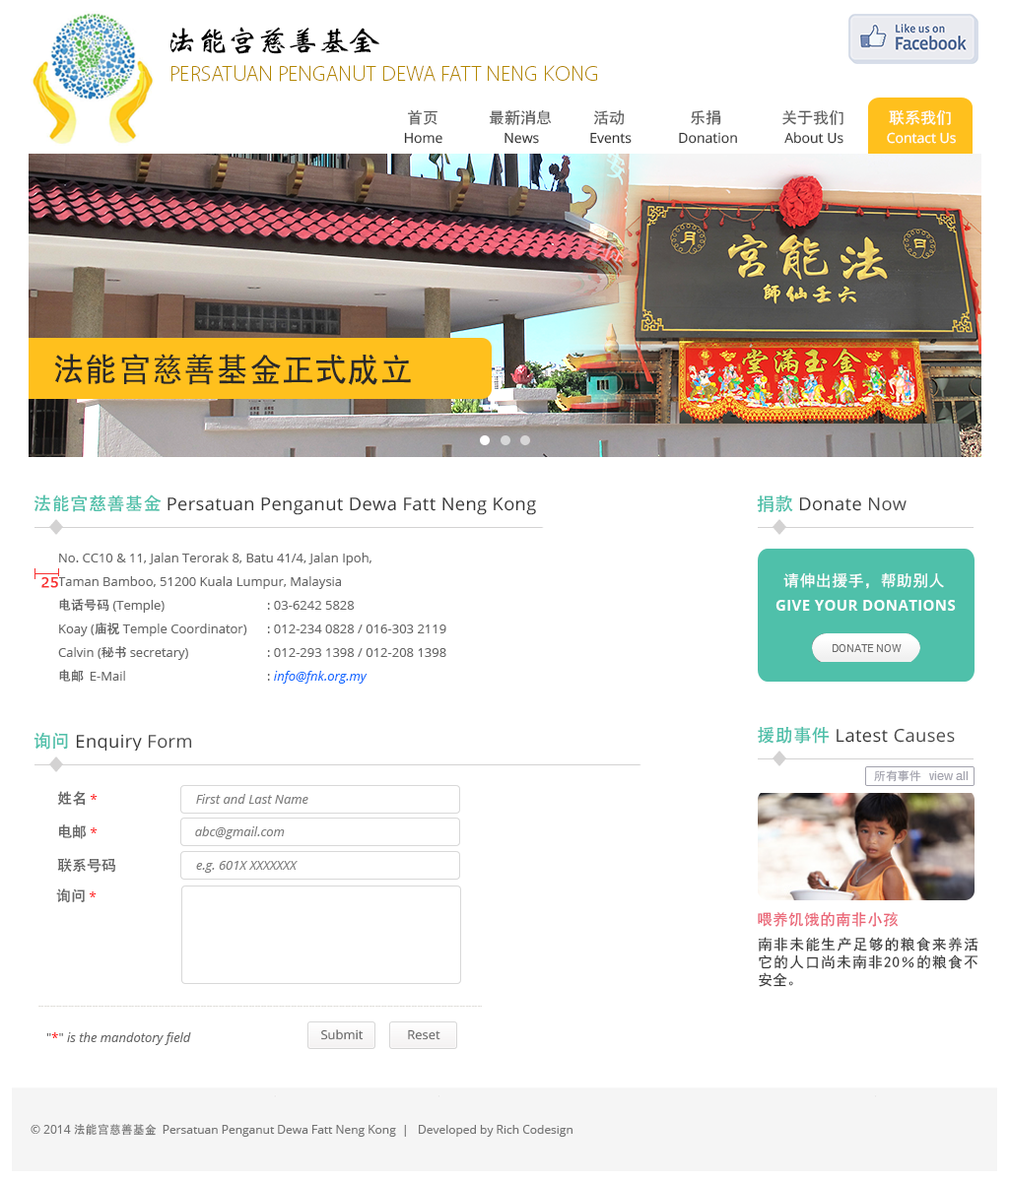
<style>
.page{position:relative;width:1009px;height:1182px;background:#ffffff}
.page>*{position:absolute;margin:0}
.t1{font:30.4px "WeibeiCSEG??NÑ²ó??";letter-spacing:-0.05em;color:#000000;text-transform:uppercase;scale:1.04 1}
.t2{font:21.6px "Vegur-Light";color:#b38701;text-transform:uppercase;scale:1.03 1}
.t3{font:15.8px "SimHei";color:#5a5a5a}
.t4{font:15.8px "SimHei";color:#ffffff}
.t5{font:13.8px "OpenSans";color:#303030}
.t6{font:13.8px "OpenSans";color:#ffffff}
.t7{font:33.6px "MS-Hei";color:#292929}
.t8{font:17.7px "OpenSans";letter-spacing:0.025em;color:#343434}
.t9{font:17.7px "AdobeHeitiStd-Regular";letter-spacing:0.025em;color:#4fc0aa}
.t10{font:17.7px "OpenSans";letter-spacing:0.025em;color:#474747}
.t11{font:12.8px/23.6px "OpenSans";color:#666666}
.t12{font:12.8px/23.6px "AdobeHeitiStd-Regular";color:#666666}
.t13{font:13.8px "Verdana";color:#f83030;font-weight:bold}
.t14{font:15.8px "SimHei";letter-spacing:0.025em;color:#ffffff}
.t15{font:12.8px/23.6px "OpenSans-Italic";color:#146cff}
.t16{font:14.8px "OpenSans-Bold";letter-spacing:0.025em;color:#ffffff}
.t17{font:11.8px "SimHei";color:#a2a2ad}
.t18{font:14.8px/33.5px "AdobeHeitiStd-Regular";color:#666666}
.t19{font:12.8px/33.5px "OpenSans";color:#ff0000}
.t20{font:12.8px "OpenSans-Italic";color:#7e7e7e}
.t21{font:14.8px "AdobeHeitiStd-Regular";color:#666666}
.t22{font:12.8px "OpenSans";color:#ff0000}
.t23{font:15.8px "MS-Hei";color:#ea6274}
.t24{font:14.8px/17.7px "SimHei";color:#353535}
.t25{font:12.8px "OpenSans-Italic";color:#666666}
.t26{font:12.8px "OpenSans";color:#666666}
.t27{font:12.2px "OpenSans";color:#666666;scale:1.04 1}
.t28{font:11.8px "OpenSans";color:#737373}
.t29{font:11.8px "MS-Hei";color:#737373}
</style>
<div class="page">
<p class="t1" style="left:170px;top:27px;width:209px;height:27px">法能宫慈善基金</p>
<p class="t2" style="left:171px;top:65px;width:426px;height:17px">PERSATUAN PENGANUT DEWA fatt neng kong</p>
<p class="t3" style="left:407px;top:109px;width:30px;height:16px">首页</p>
<p class="t3" style="left:489px;top:109px;width:63px;height:16px">最新消息</p>
<p class="t3" style="left:594px;top:110px;width:31px;height:15px">活动</p>
<p class="t3" style="left:691px;top:109px;width:30px;height:16px">乐捐</p>
<p class="t3" style="left:782px;top:109px;width:61px;height:16px">关于我们</p>
<p class="t4" style="left:889px;top:109px;width:62px;height:16px">联系我们</p>
<p class="t5" style="left:404px;top:132px;width:552px;height:12px">Home                 News              Events             Donation             About Us            <span class="t6">Contact Us</span></p>
<p class="t7" style="left:54px;top:354px;width:357px;height:31px">法能宫慈善基金正式成立</p>
<p class="t8" style="left:34px;top:495px;width:502px;height:20px"><span class="t9">法能宫慈善基金 </span>Persatuan Penganut Dewa Fatt Neng Kong</p>
<p class="t8" style="left:757px;top:495px;width:149px;height:17px"><span class="t9">捐款</span> Donate <span class="t10">Now</span></p>
<p class="t11" style="left:58px;top:553px;width:313px;height:130px;text-align:justify">No. CC10 &amp; 11, Jalan Terorak 8, Batu 41/4, Jalan Ipoh, <br>Taman Bamboo, 51200 Kuala Lumpur, Malaysia<br><span class="t12">电话号码</span> (Temple) <br>Koay (<span class="t12">庙祝 </span>Temple Coordinator) <br>Calvin (<span class="t12">秘书 </span>secretary) <br><span class="t12">电邮  </span>E-Mail</p>
<p class="t13" style="left:41px;top:577px;width:17px;height:11px">25</p>
<p class="t14" style="left:783px;top:572px;width:161px;height:17px">请伸出援手，帮助别人</p>
<p class="t11" style="left:267px;top:601px;width:179px;height:83px;text-align:justify">: 03-6242 5828<br>: 012-234 0828 / 016-303 2119<br>: 012-293 1398 / 012-208 1398<br>: <span class="t15">info@fnk.org.my</span></p>
<p class="t16" style="left:775px;top:600px;width:181px;height:11px">GIVE YOUR DONATIONS</p>
<p class="t8" style="left:33px;top:732px;width:159px;height:21px"><span class="t9">询问</span> Enquiry <span class="t10">Form</span></p>
<p class="t8" style="left:758px;top:726px;width:197px;height:18px"><span class="t9">援助事件</span> Latest <span class="t10">Causes</span></p>
<p class="t17" style="left:874px;top:770px;width:47px;height:12px">所有事件</p>
<p class="t18" style="left:57px;top:791px;width:58px;height:82px">姓名 <span class="t19">*  <br></span>电邮<span class="t19"> *  <br></span>联系号码</p>
<p class="t20" style="left:196px;top:794px;width:112px;height:10px">First and Last Name</p>
<p class="t20" style="left:195px;top:826px;width:90px;height:13px">abc@gmail.com</p>
<p class="t20" style="left:196px;top:861px;width:101px;height:12px">e.g. 601X XXXXXXX</p>
<p class="t21" style="left:56px;top:889px;width:41px;height:14px">询问<span class="t22"> *</span></p>
<p class="t23" style="left:758px;top:912px;width:140px;height:15px">喂养饥饿的南非小孩</p>
<p class="t24" style="left:758px;top:937px;width:220px;height:50px;text-align:justify">南非未能生产足够的粮食来养活它的人口尚未南非20％的粮食不安全。</p>
<p class="t25" style="left:46px;top:1032px;width:145px;height:13px"><span class="t26">"</span><span class="t22">*</span><span class="t26">" </span>is the mandotory field</p>
<p class="t27" style="left:321px;top:1029px;width:42px;height:11px">Submit</p>
<p class="t27" style="left:408px;top:1029px;width:32px;height:11px">Reset</p>
<p class="t28" style="left:31px;top:1124px;width:541px;height:13px">© 2014 <span class="t29">法能宫慈善基金 </span>Persatuan Penganut Dewa Fatt Neng Kong  |   Developed by Rich Codesign</p>
</div>
